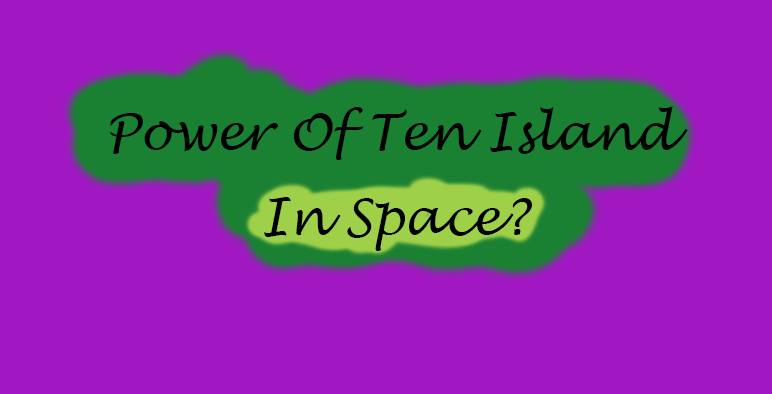
<style>
.page{position:relative;width:772px;height:394px;background:#a118c3}
.page>*{position:absolute;margin:0}
.t1{font:50px "LucidaHandwriting-Italic";color:#000000}
</style>
<div class="page">
<p class="t1" style="left:110px;top:106px;width:578px;height:54px">Power Of Ten Island</p>
<p class="t1" style="left:264px;top:197px;width:268px;height:54px">In Space?</p>
</div>
